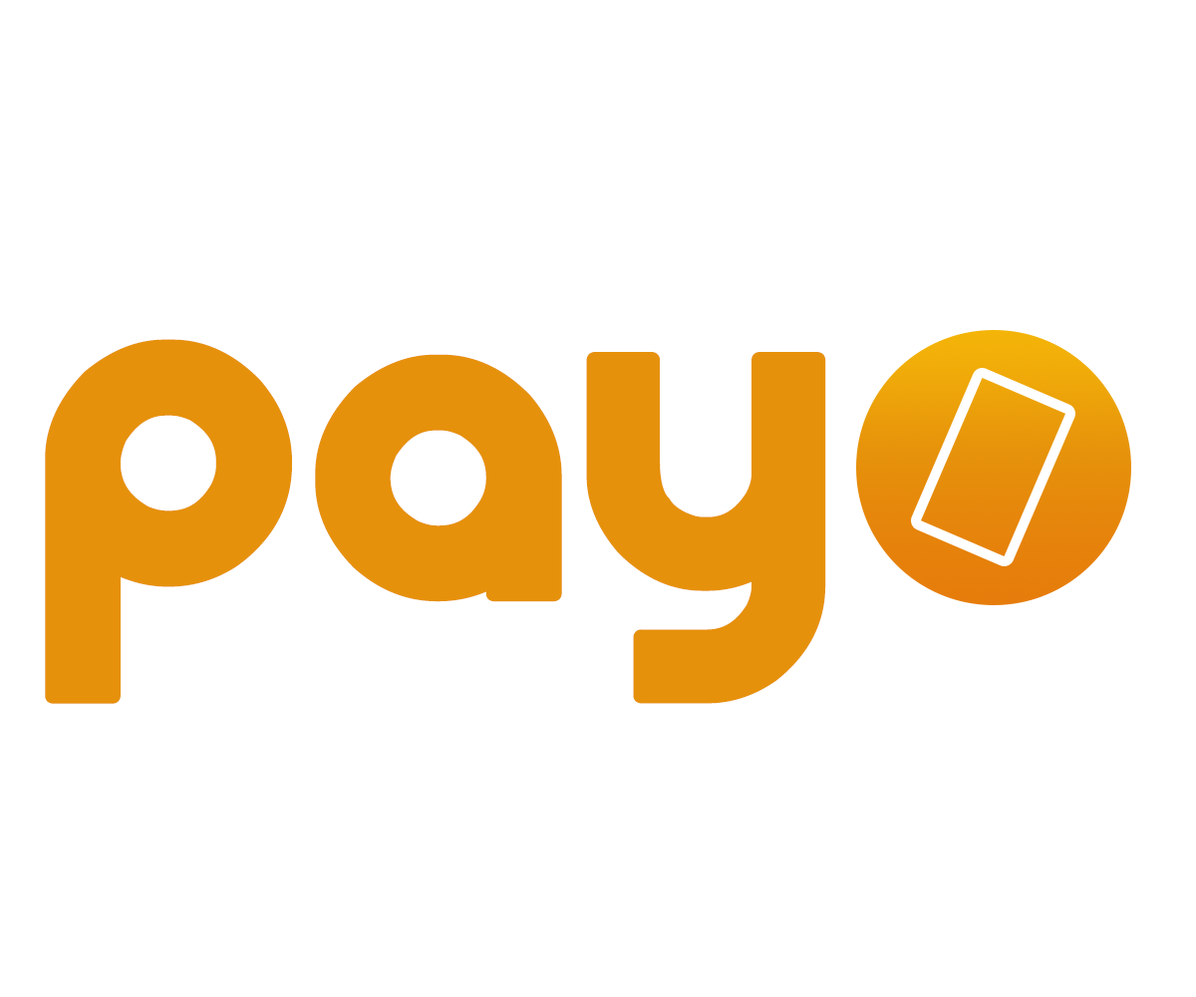
<style>
.page{position:relative;width:1196px;height:997px;background:#ffffff}
.page>*{position:absolute;margin:0}
.t1{font:498.4px "PatinioBasica";letter-spacing:0.001em;color:#e6910b;font-weight:bold}
</style>
<div class="page">
<p class="t1" style="left:45px;top:339px;width:781px;height:365px">pay</p>
</div>
